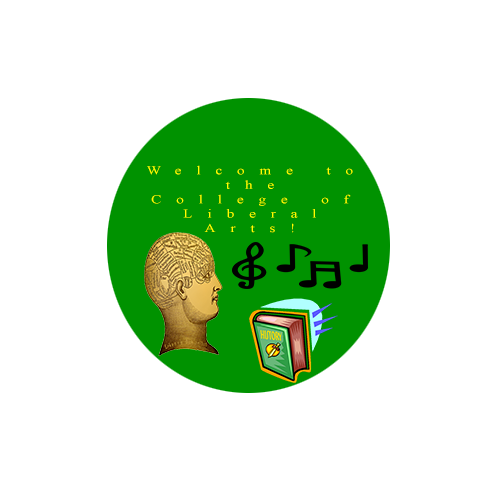
<style>
.page{position:relative;width:500px;height:500px;background:#ffffff}
.page>*{position:absolute;margin:0}
.t1{font:12px "TimesNewRomanPSMT";letter-spacing:0.985em;color:#ffff00;scale:1.26 1}
</style>
<div class="page">
<p class="t1" style="left:147px;top:165px;width:206px;height:68px;text-align:center">Welcome to <br>the <br>College of<br>Liberal Arts!</p>
</div>
